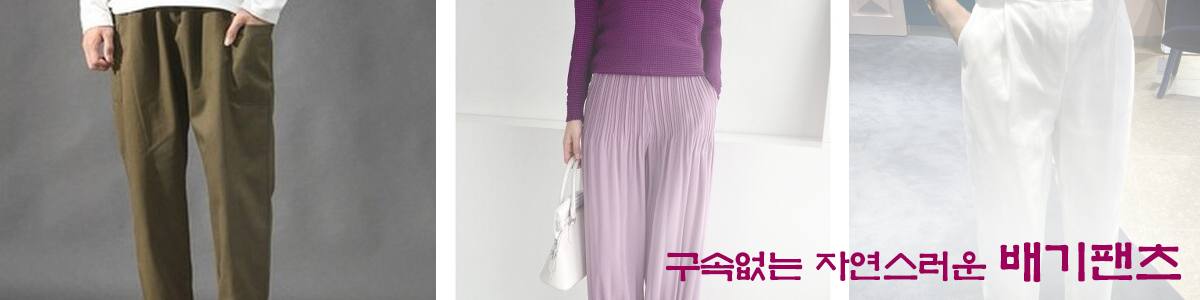
<style>
.page{position:relative;width:1200px;height:300px}
.page>*{position:absolute;margin:0}
.t1{font:36px "YetR-HM";letter-spacing:-0.05em;color:#9d0159}
.t2{font:48px "YetR-HM";letter-spacing:-0.05em;color:#9d0159}
</style>
<div class="page">
<p class="t1" style="left:666px;top:242px;width:516px;height:41px">구속없는 자연스러운 <span class="t2">배기팬츠</span></p>
</div>
